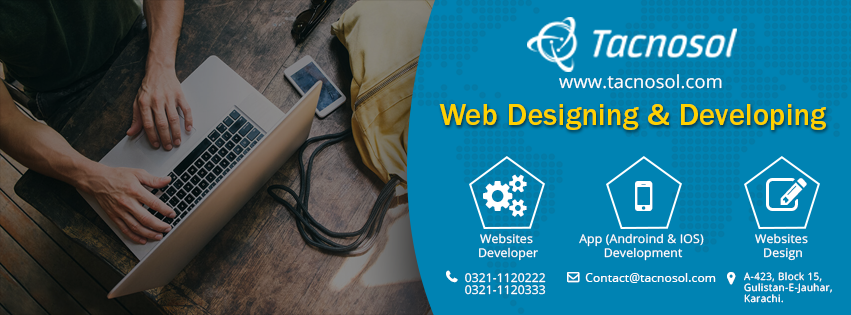
<style>
.page{position:relative;width:851px;height:315px;background:#0083b3}
.page>*{position:absolute;margin:0}
.t1{font:18px "OpenSans";letter-spacing:0.01em;color:#ffffff}
.t2{font:30.6px "ITCFranklinGothicStd-Med";letter-spacing:0.01em;color:#ffd100}
.t3{font:12px "OpenSans";letter-spacing:0.01em;color:#ffffff}
.t4{font:10px/11px "OpenSans";letter-spacing:0.05em;color:#ffffff;scale:0.96 1}
</style>
<div class="page">
<p class="t1" style="left:559px;top:74px;width:163px;height:15px">www.tacnosol.com</p>
<p class="t2" style="left:439px;top:104px;width:387px;height:26px">Web Designing &amp; Developing</p>
<p class="t3" style="left:479px;top:233px;width:59px;height:28px;text-align:center">Websites <br>Developer</p>
<p class="t3" style="left:579px;top:233px;width:125px;height:28px;text-align:center">App (Androind &amp; IOS) <br>Development</p>
<p class="t3" style="left:755px;top:233px;width:53px;height:28px;text-align:center">Websites <br>Design</p>
<p class="t3" style="left:465px;top:273px;width:81px;height:10px">0321-1120222</p>
<p class="t3" style="left:585px;top:273px;width:131px;height:10px">Contact@tacnosol.com</p>
<p class="t4" style="left:744px;top:272px;width:88px;height:31px">A-423, Block 15, <br>Gulistan-E-Jauhar,<br>Karachi.</p>
<p class="t3" style="left:465px;top:285px;width:81px;height:10px">0321-1120333</p>
</div>
